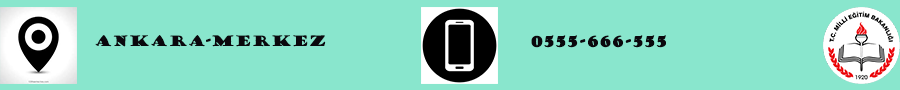
<style>
.page{position:relative;width:900px;height:90px;background:#89e6cd}
.page>*{position:absolute;margin:0}
.t1{font:14px "GoudyStout";color:#0b080d}
.t2{font:14px "GoudyStout";color:#0b080d;font-weight:bold}
</style>
<div class="page">
<p class="t1" style="left:95px;top:35px;width:231px;height:12px">ankara-merkez</p>
<p class="t2" style="left:531px;top:35px;width:135px;height:13px">0555-666-555</p>
</div>
